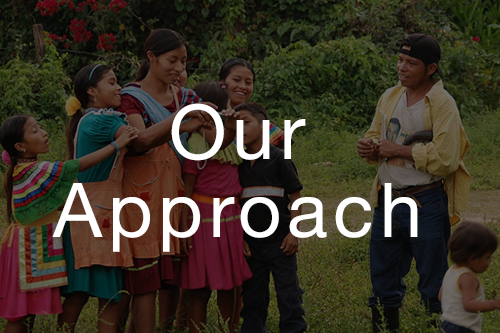
<style>
.page{position:relative;width:500px;height:333px}
.page>*{position:absolute;margin:0}
.t1{font:75.5px/262.5px "HelveticaNeue";letter-spacing:0.075em;color:#ffffff}
</style>
<div class="page">
<p class="t1" style="left:52px;top:103px;width:366px;height:149px;text-align:center">Our<br>Approach</p>
</div>
